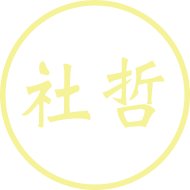
<style>
.page{position:relative;width:190px;height:190px;background:#ffffff}
.page>*{position:absolute;margin:0}
.t1{font:83.3px "Weibei-TC-Bold";color:#f5f297;scale:0.94 1}
</style>
<div class="page">
<p class="t1" style="left:21px;top:57px;width:143px;height:71px">社哲</p>
</div>
